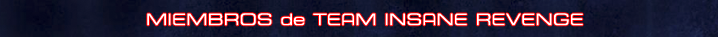
<style>
.page{position:relative;width:718px;height:37px}
.page>*{position:absolute;margin:0}
.t1{font:16px "ESL-eSport-Ext-Light";color:#ffffff}
</style>
<div class="page">
<p class="t1" style="left:147px;top:13px;width:436px;height:13px">MIEMBROS de TEAM INSANE REVENGE</p>
</div>
